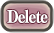
<style>
.page{position:relative;width:54px;height:33px}
.page>*{position:absolute;margin:0}
.t1{font:17px "RyuminPro-ExBold";letter-spacing:-0.08em;color:#ffffff;font-weight:bold;scale:0.9 1}
</style>
<div class="page">
<p class="t1" style="left:7px;top:9px;width:41px;height:14px">Delete</p>
</div>
